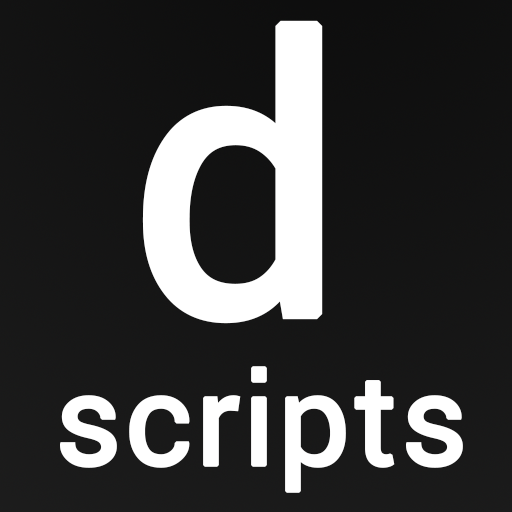
<style>
.page{position:relative;width:512px;height:512px}
.page>*{position:absolute;margin:0}
.t1{font:378px "Roboto-Regular";color:#ffffff;font-weight:bold}
.t2{font:127px "Roboto-Regular";color:#ffffff;font-weight:bold}
</style>
<div class="page">
<p class="t1" style="left:142px;top:20px;width:181px;height:304px">d</p>
<p class="t2" style="left:60px;top:366px;width:403px;height:127px">scripts</p>
</div>
